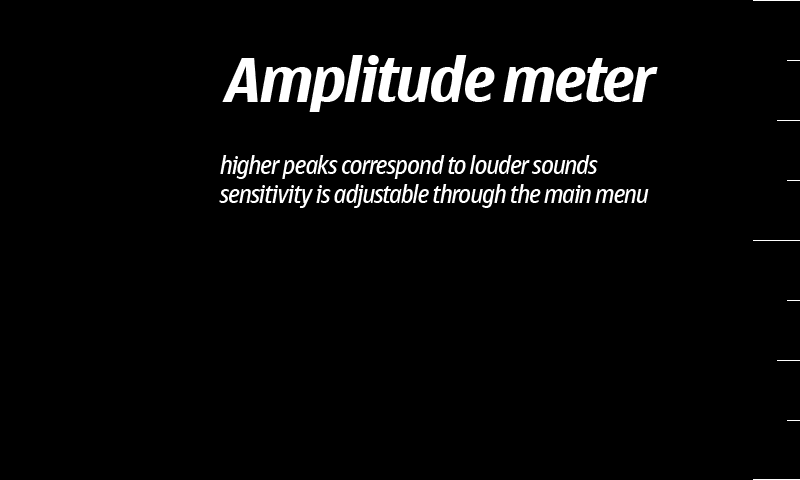
<style>
.page{position:relative;width:800px;height:480px;background:#000000}
.page>*{position:absolute;margin:0}
.t1{font:60px "NokiaLargeMultiscript-BoldItalic";color:#ffffff}
.t2{font:24px "NokiaLargeMultiscript-Italic";color:#ffffff}
</style>
<div class="page">
<p class="t1" style="left:222px;top:55px;width:436px;height:57px">Amplitude meter</p>
<p class="t2" style="left:219px;top:155px;width:430px;height:53px">higher peaks correspond to louder sounds<br>sensitivity is adjustable through the main menu</p>
</div>
